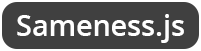
<style>
.page{position:relative;width:201px;height:51px;background:#404040}
.page>*{position:absolute;margin:0}
.t1{font:28.7px "OpenSans-Semibold";color:#ffffff}
</style>
<div class="page">
<p class="t1" style="left:17px;top:14px;width:167px;height:29px">Sameness.js</p>
</div>
